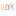
<style>
.page{position:relative;width:16px;height:16px;background:#ffffff}
.page>*{position:absolute;margin:0}
.t1{font:8px "YanoneKaffeesatz-Light"}
</style>
<div class="page">
<p class="t1" style="left:1px;top:4px;width:14px;height:6px">UIDPC</p>
</div>
